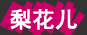
<style>
.page{position:relative;width:87px;height:35px;background:#cc0066}
.page>*{position:absolute;margin:0}
.t1{font:22.2px "SimHei";color:#ffffff;font-weight:bold}
</style>
<div class="page">
<p class="t1" style="left:10px;top:9px;width:67px;height:21px">梨花儿</p>
</div>
